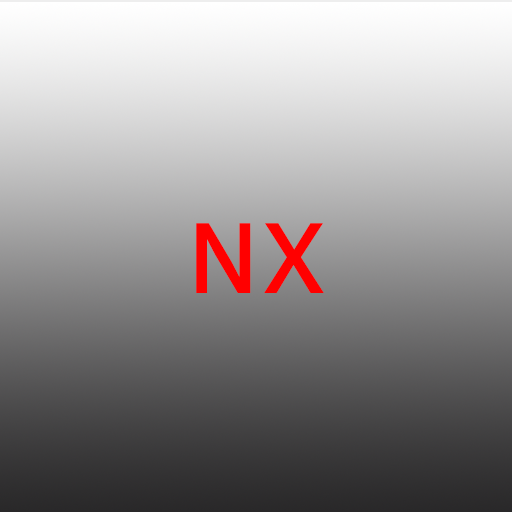
<style>
.page{position:relative;width:512px;height:512px}
.page>*{position:absolute;margin:0}
.t1{font:100px "IBMPlexSans-Medium";letter-spacing:0.03em;color:#ff0000}
</style>
<div class="page">
<p class="t1" style="left:196px;top:223px;width:128px;height:70px">NX</p>
</div>
